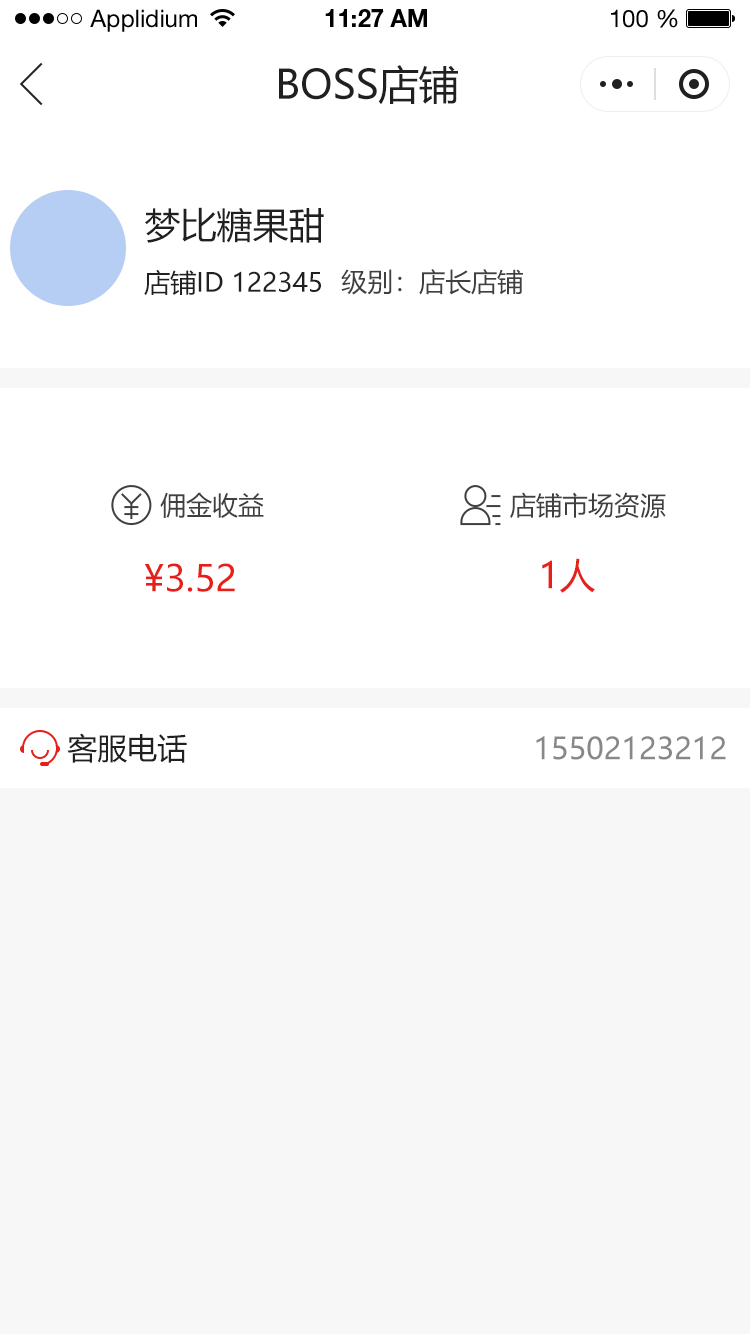
<style>
.page{position:relative;width:750px;height:1334px;background:#ffffff}
.page>*{position:absolute;margin:0}
.t1{font:24px "HelveticaNeueLTStd-Roman";color:#000000}
.t2{font:24px "HelveticaNeueLTStd-Bd";color:#000000}
.t3{font:40px "MicrosoftYaHei";color:#202020;text-transform:uppercase}
.t4{font:36px "MicrosoftYaHei";color:#202020;text-transform:uppercase}
.t5{font:26px "MicrosoftYaHei";color:#202020;text-transform:uppercase}
.t6{font:26px "MicrosoftYaHei";color:#404040;text-transform:uppercase}
.t7{font:36px "MicrosoftYaHei";color:#e61f18;text-transform:uppercase}
.t8{font:30px "MicrosoftYaHei";color:#202020;text-transform:uppercase}
.t9{font:30px "MicrosoftYaHei";color:#888888;text-transform:uppercase}
</style>
<div class="page">
<p class="t1" style="left:90px;top:9px;width:107px;height:23px">Applidium</p>
<p class="t2" style="left:325px;top:9px;width:102px;height:18px">11:27 AM</p>
<p class="t1" style="left:611px;top:9px;width:67px;height:19px">100 %</p>
<p class="t3" style="left:279px;top:65px;width:179px;height:39px">boss店铺</p>
<p class="t4" style="left:145px;top:207px;width:179px;height:36px">梦比糖果甜</p>
<p class="t5" style="left:144px;top:269px;width:177px;height:27px">店铺ID 122345</p>
<p class="t6" style="left:341px;top:269px;width:182px;height:26px">级别：店长店铺</p>
<p class="t6" style="left:160px;top:492px;width:104px;height:26px">佣金收益</p>
<p class="t6" style="left:510px;top:492px;width:156px;height:26px">店铺市场资源</p>
<p class="t7" style="left:542px;top:558px;width:53px;height:35px">1人</p>
<p class="t7" style="left:144px;top:563px;width:91px;height:29px">¥3.52</p>
<p class="t8" style="left:67px;top:733px;width:120px;height:30px">客服电话</p>
<p class="t9" style="left:536px;top:736px;width:190px;height:24px">15502123212</p>
</div>
